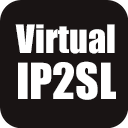
<style>
.page{position:relative;width:128px;height:128px;background:#191414}
.page>*{position:absolute;margin:0}
.t1{font:36px "Impact";color:#ffffff}
.t2{font:46px "Impact";color:#ffffff}
</style>
<div class="page">
<p class="t1" style="left:15px;top:24px;width:100px;height:30px">Virtual</p>
<p class="t2" style="left:18px;top:61px;width:98px;height:39px">IP2SL</p>
</div>
